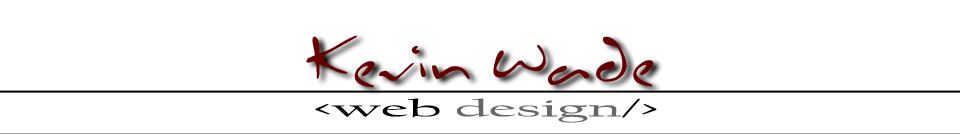
<style>
.page{position:relative;width:960px;height:134px;background:#ffffff}
.page>*{position:absolute;margin:0}
.t1{font:72px "Inkburrow";color:#660000}
.t2{font:24px "CalifornianFB-Reg";color:#666666;scale:2.63 1}
.t3{font:24px "CalifornianFB-Reg";color:#000000;scale:2.63 1}
</style>
<div class="page">
<p class="t1" style="left:306px;top:35px;width:164px;height:53px">Kevin</p>
<p class="t1" style="left:493px;top:36px;width:161px;height:51px">Wade</p>
<p class="t2" style="left:315px;top:98px;width:342px;height:25px"><span class="t3">&lt;web </span>design<span class="t3">/&gt;</span></p>
</div>
